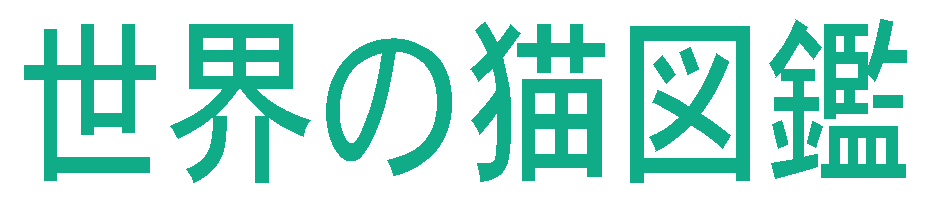
<style>
.page{position:relative;width:940px;height:200px;background:#ffffff}
.page>*{position:absolute;margin:0}
.t1{font:180px "Osaka";color:#10ac87;scale:0.83 1}
</style>
<div class="page">
<p class="t1" style="left:24px;top:19px;width:883px;height:164px">世界の猫図鑑</p>
</div>
